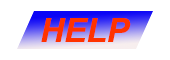
<style>
.page{position:relative;width:170px;height:60px;background:#ffffff}
.page>*{position:absolute;margin:0}
.t1{font:33.3px "Arial-BoldItalicMT";color:#ff3300}
</style>
<div class="page">
<p class="t1" style="left:41px;top:18px;width:90px;height:24px">HELP</p>
</div>
